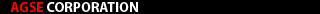
<style>
.page{position:relative;width:320px;height:14px;background:#000000}
.page>*{position:absolute;margin:0}
.t1{font:14px "MyriadPro-Bold";color:#fdfcfc}
.t2{font:14px "MyriadPro-Bold";color:#fd0101}
</style>
<div class="page">
<p class="t1" style="left:10px;top:2px;width:128px;height:10px"><span class="t2">AGSE</span> CORPORATION</p>
</div>
